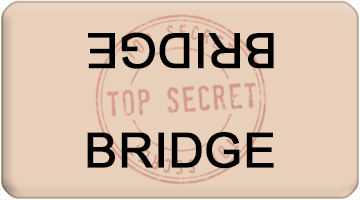
<style>
.page{position:relative;width:360px;height:200px;background:#e8d0bb}
.page>*{position:absolute;margin:0}
.t1{font:48px "ArialMT";color:#000000;font-weight:bold}
</style>
<div class="page">
<p class="t1" style="left:88px;top:32px;width:186px;height:37px;rotate:180deg">BRIDGE</p>
<p class="t1" style="left:87px;top:132px;width:187px;height:37px">BRIDGE</p>
</div>
